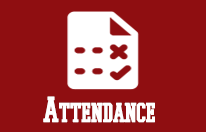
<style>
.page{position:relative;width:206px;height:132px;background:#8f0e11}
.page>*{position:absolute;margin:0}
.t1{font:26.7px "CollegeBoy";letter-spacing:-0.01em;color:#ffffff;font-weight:bold}
</style>
<div class="page">
<p class="t1" style="left:43px;top:96px;width:112px;height:27px">Attendance</p>
</div>
